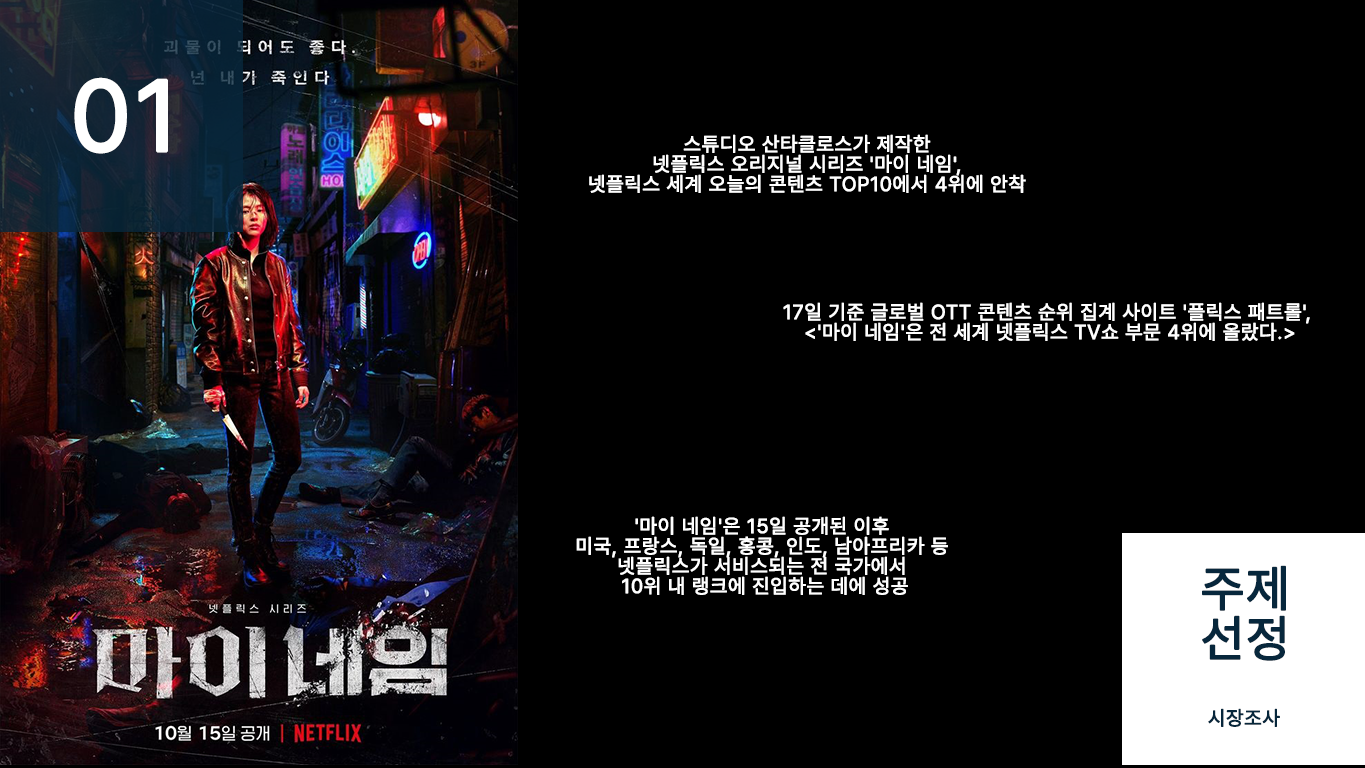
<style>
.page{position:relative;width:1365px;height:768px;background:#000000}
.page>*{position:absolute;margin:0}
.t1{font:100px "Pretendard-Regular";letter-spacing:0.03em;color:#ffffff;font-weight:bold}
.t2{font:20px/20px "Pretendard-Regular";letter-spacing:0.03em;color:#ffffff;font-weight:bold}
.t3{font:50px/50px "Pretendard-Regular";letter-spacing:0.03em;color:#07273c;font-weight:bold}
.t4{font:20px "Pretendard-Regular";letter-spacing:0.03em;color:#07273c;font-weight:bold}
</style>
<div class="page">
<p class="t1" style="left:74px;top:77px;width:94px;height:77px">01</p>
<p class="t2" style="left:589px;top:134px;width:437px;height:59px;text-align:center">스튜디오 산타클로스가 제작한 <br>넷플릭스 오리지널 시리즈 '마이 네임', <br>넷플릭스 세계 오늘의 콘텐츠 TOP10에서 4위에 안착</p>
<p class="t2" style="left:783px;top:302px;width:527px;height:39px;text-align:center">17일 기준 글로벌 OTT 콘텐츠 순위 집계 사이트 '플릭스 패트롤', <br>&lt;'마이 네임'은 전 세계 넷플릭스 TV쇼 부문 4위에 올랐다.&gt;</p>
<p class="t2" style="left:576px;top:516px;width:372px;height:79px;text-align:center">'마이 네임'은 15일 공개된 이후 <br>미국, 프랑스, 독일, 홍콩, 인도, 남아프리카 등 <br>넷플릭스가 서비스되는 전 국가에서 <br>10위 내 랭크에 진입하는 데에 성공</p>
<p class="t3" style="left:1202px;top:565px;width:84px;height:96px">주제<br>선정</p>
<p class="t4" style="left:1208px;top:708px;width:72px;height:19px">시장조사</p>
</div>
